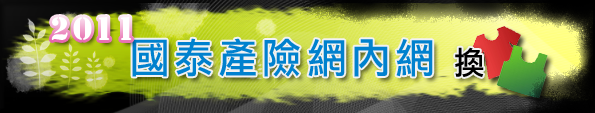
<style>
.page{position:relative;width:595px;height:113px}
.page>*{position:absolute;margin:0}
.t1{font:29.7px "StencilStd";letter-spacing:0.12em;color:#ffffff}
.t2{font:41.2px "DFLiHei-Md-HK-BF";letter-spacing:0.12em;color:#0081ce;scale:0.96 1}
.t3{font:31.8px "DFLiHei-Md-HK-BF";letter-spacing:0.12em;color:#000000;scale:0.96 1}
</style>
<div class="page">
<p class="t1" style="left:51px;top:17px;width:81px;height:23px">2011</p>
<p class="t2" style="left:132px;top:38px;width:301px;height:39px">國泰產險網內網</p>
<p class="t3" style="left:455px;top:47px;width:29px;height:30px">換</p>
</div>
